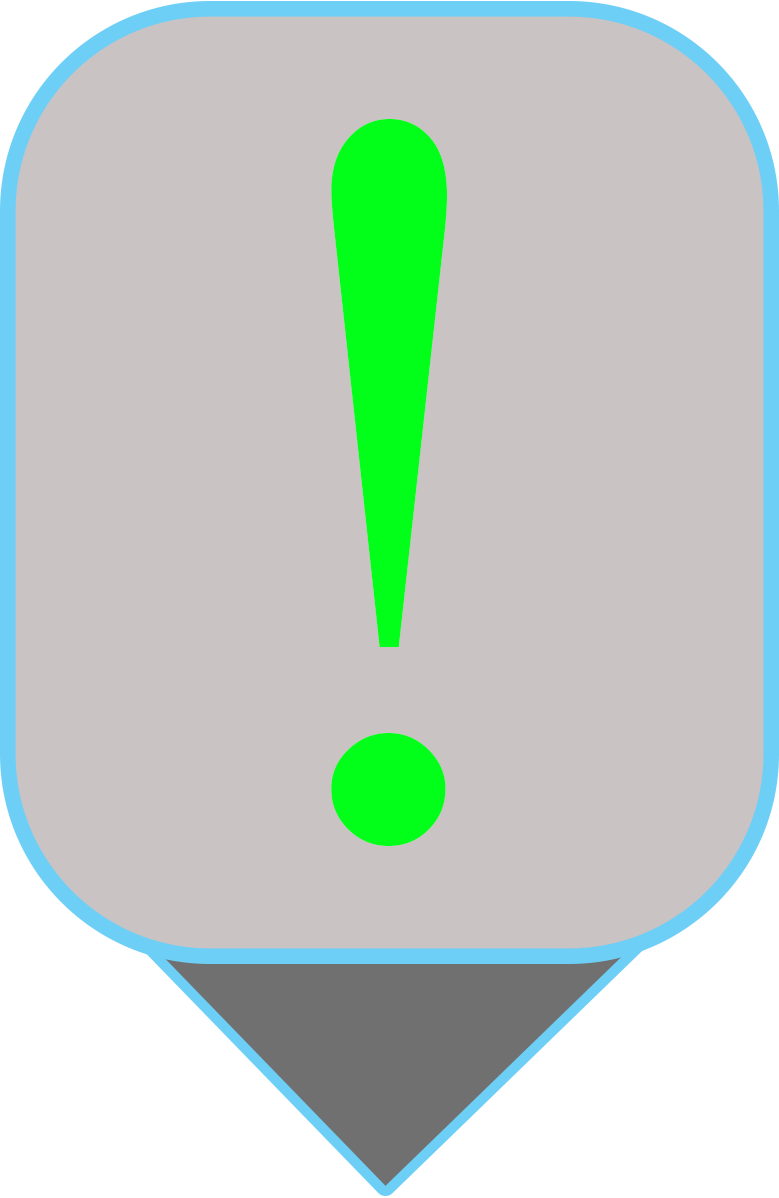
<style>
.page{position:relative;width:779px;height:1198px;background:#c9c3c3}
.page>*{position:absolute;margin:0}
.t1{font:1570.3px "Microsoft-Himalaya";color:#01ff19}
</style>
<div class="page">
<p class="t1" style="left:331px;top:119px;width:117px;height:727px">!</p>
</div>
